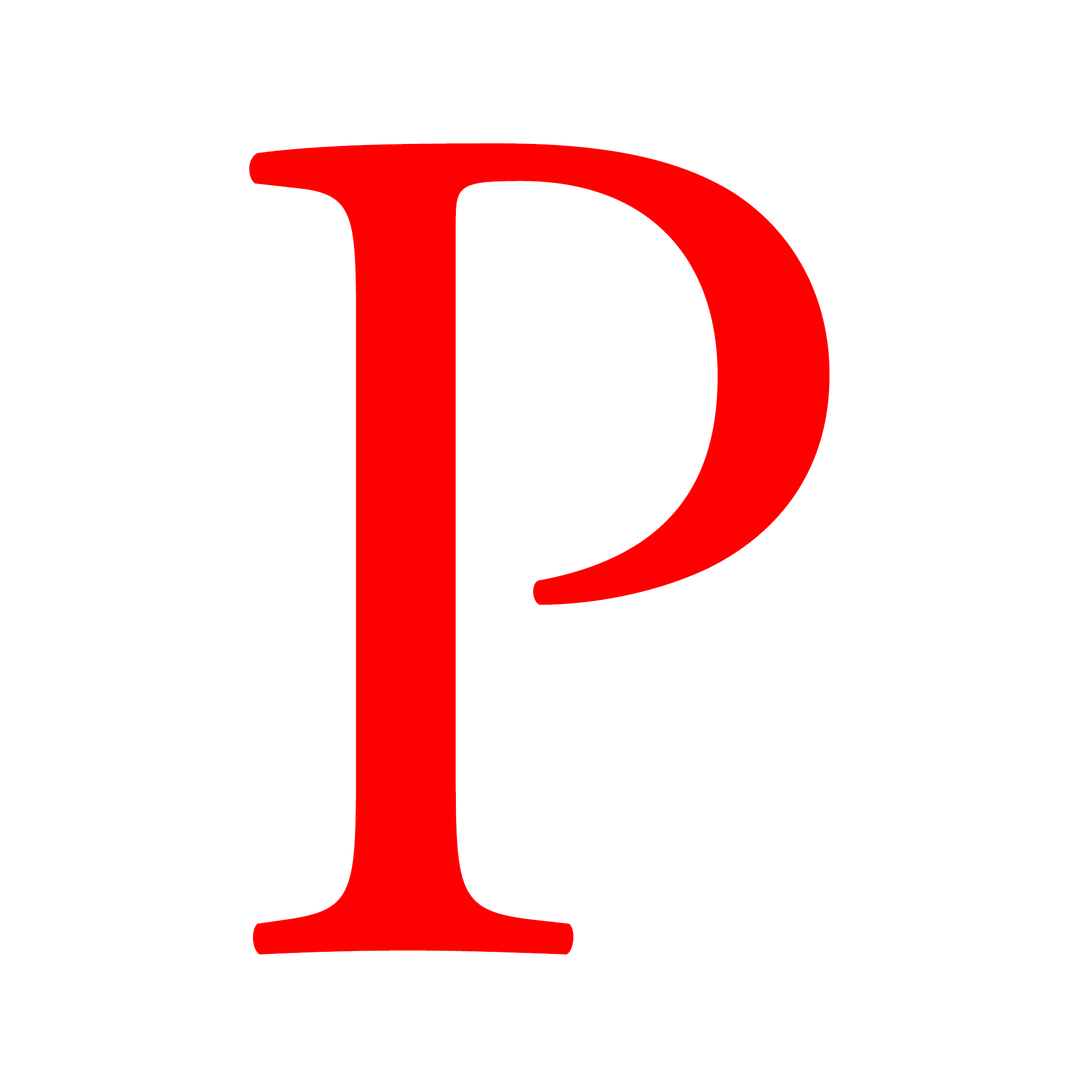
<style>
.page{position:relative;width:1092px;height:1092px;background:#ffffff}
.page>*{position:absolute;margin:0}
.t1{font:1217.6px "AGaramondPro-Regular";color:#ff0000}
</style>
<div class="page">
<p class="t1" style="left:249px;top:143px;width:581px;height:811px">P</p>
</div>
